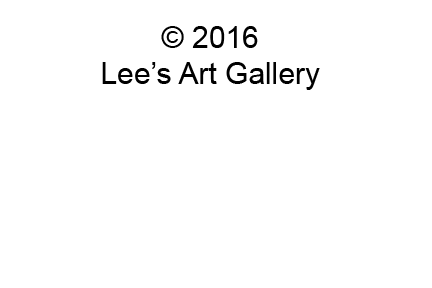
<style>
.page{position:relative;width:432px;height:288px;background:#ffffff}
.page>*{position:absolute;margin:0}
.t1{font:30px "ArialMT";color:#000000}
</style>
<div class="page">
<p class="t1" style="left:102px;top:26px;width:218px;height:64px;text-align:center">© 2016<br>Lee’s Art Gallery</p>
</div>
